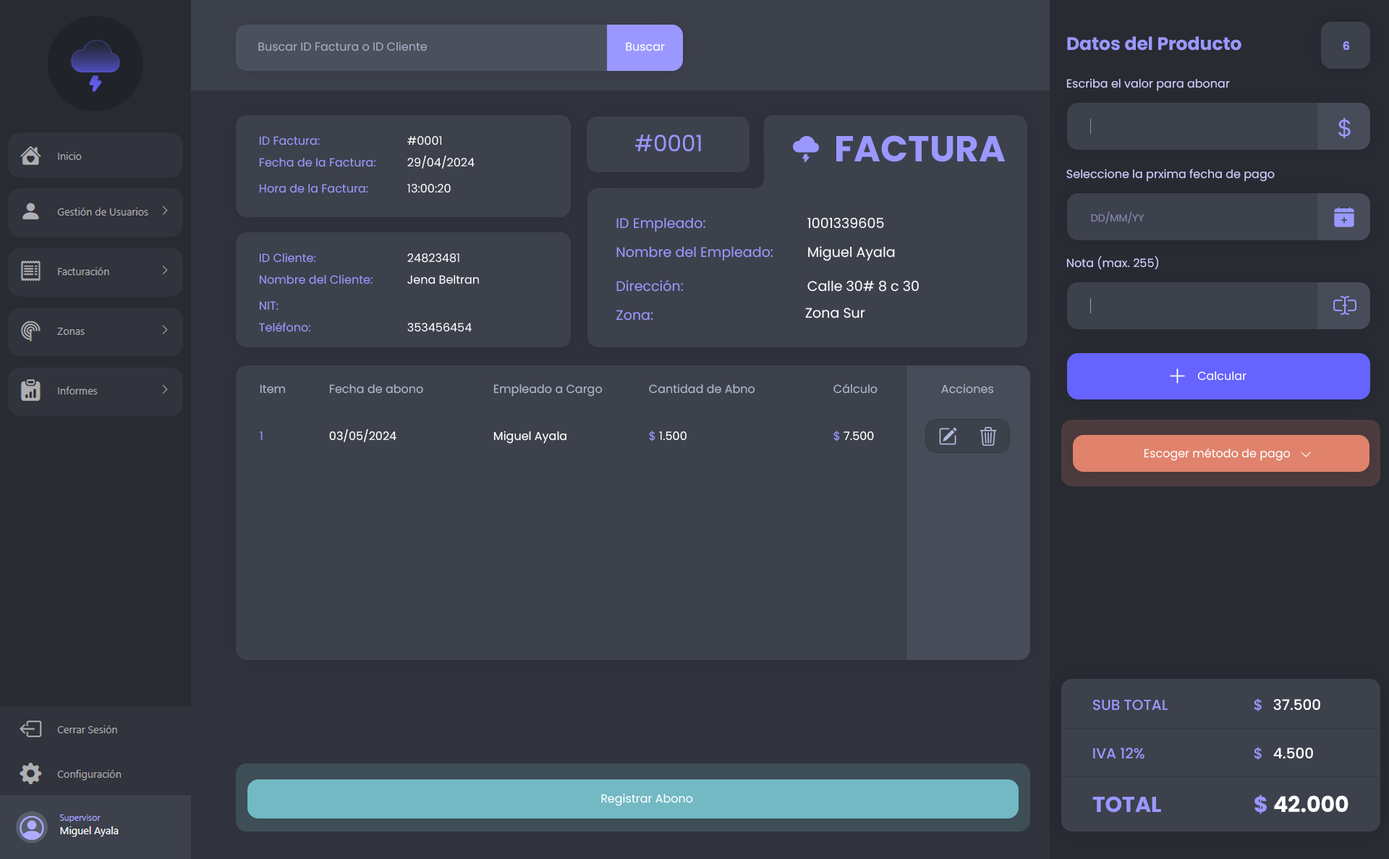
<style>
.page{position:relative;width:1389px;height:859px;background:#3d414c}
.page>*{position:absolute;margin:0}
.t1{font:11.6px "Poppins-Regular";color:#a2aac0}
.t2{font:11.6px "Poppins-Regular";color:#ffffff}
.t3{font:18.1px "Poppins-Bold";color:#9a98ff}
.t4{font:11.6px "Poppins-Bold";color:#9a98ff}
.t5{font:11.6px "Poppins-Regular";color:#cfceff}
.t6{font:11.6px "Poppins-Regular";color:#9a98ff}
.t7{font:22.4px "Poppins-Regular";color:#9a98ff}
.t8{font:36.2px "Poppins-Bold";color:#9a98ff}
.t9{font:13.8px "Poppins-Regular";color:#9a98ff}
.t10{font:13.8px "Poppins-Regular";color:#ffffff}
.t11{font:10.1px "Poppins-Regular";color:#8484ac}
.t12{font:11.6px "Poppins-Regular";color:#aeb5c8}
.t13{font:14.5px "Poppins-Medium";color:#9a98ff}
.t14{font:14.5px "Poppins-Medium";color:#ffffff}
.t15{font:21.7px "Poppins-Bold";color:#9a98ff}
.t16{font:21.7px "Poppins-Bold";color:#ffffff}
</style>
<div class="page">
<p class="t1" style="left:258px;top:41px;width:169px;height:10px">Buscar ID Factura o ID Cliente</p>
<p class="t2" style="left:626px;top:42px;width:39px;height:9px">Buscar</p>
<p class="t3" style="left:1067px;top:36px;width:174px;height:15px">Datos del Producto</p>
<p class="t4" style="left:1343px;top:41px;width:6px;height:9px">6</p>
<p class="t5" style="left:1066px;top:78px;width:164px;height:13px">Escriba el valor para abonar</p>
<p class="t6" style="left:259px;top:136px;width:61px;height:9px">ID Factura:</p>
<p class="t2" style="left:407px;top:136px;width:35px;height:9px">#0001</p>
<p class="t7" style="left:635px;top:135px;width:66px;height:16px">#0001</p>
<p class="t8" style="left:836px;top:135px;width:169px;height:27px">FACTURA</p>
<p class="t6" style="left:259px;top:158px;width:116px;height:9px">Fecha de la Factura:</p>
<p class="t2" style="left:407px;top:156px;width:68px;height:13px">29/04/2024</p>
<p class="t5" style="left:1066px;top:169px;width:209px;height:13px">Seleccione la prxima fecha de pago</p>
<p class="t6" style="left:259px;top:184px;width:109px;height:9px">Hora de la Factura:</p>
<p class="t2" style="left:407px;top:184px;width:44px;height:9px">13:00:20</p>
<p class="t9" style="left:616px;top:217px;width:89px;height:15px">ID Empleado:</p>
<p class="t10" style="left:807px;top:217px;width:77px;height:12px">1001339605</p>
<p class="t11" style="left:1091px;top:211px;width:53px;height:13px">DD/MM/YY</p>
<p class="t9" style="left:616px;top:246px;width:157px;height:15px">Nombre del Empleado:</p>
<p class="t10" style="left:808px;top:246px;width:87px;height:15px">Miguel Ayala</p>
<p class="t6" style="left:259px;top:252px;width:57px;height:11px">ID Cliente:</p>
<p class="t2" style="left:407px;top:253px;width:52px;height:10px">24823481</p>
<p class="t5" style="left:1066px;top:255px;width:93px;height:15px">Nota (max. 255)</p>
<p class="t6" style="left:259px;top:274px;width:114px;height:10px">Nombre del Cliente:</p>
<p class="t2" style="left:407px;top:275px;width:72px;height:9px">Jena Beltran</p>
<p class="t9" style="left:616px;top:279px;width:67px;height:13px">Dirección:</p>
<p class="t10" style="left:807px;top:280px;width:112px;height:12px">Calle 30# 8 c 30</p>
<p class="t6" style="left:259px;top:301px;width:19px;height:9px">NIT:</p>
<p class="t9" style="left:616px;top:310px;width:37px;height:10px">Zona:</p>
<p class="t10" style="left:805px;top:307px;width:60px;height:11px">Zona Sur</p>
<p class="t6" style="left:259px;top:322px;width:51px;height:10px">Teléfono:</p>
<p class="t2" style="left:407px;top:323px;width:65px;height:9px">353456454</p>
<p class="t2" style="left:1197px;top:371px;width:49px;height:9px">Calcular</p>
<p class="t12" style="left:260px;top:384px;width:25px;height:9px">Item</p>
<p class="t12" style="left:329px;top:384px;width:94px;height:9px">Fecha de abono</p>
<p class="t12" style="left:493px;top:384px;width:110px;height:12px">Empleado a Cargo</p>
<p class="t12" style="left:649px;top:383px;width:106px;height:10px">Cantidad de Abno</p>
<p class="t12" style="left:833px;top:383px;width:44px;height:10px">Cálculo</p>
<p class="t12" style="left:941px;top:383px;width:53px;height:10px">Acciones</p>
<p class="t6" style="left:260px;top:431px;width:3px;height:10px">1</p>
<p class="t2" style="left:329px;top:429px;width:67px;height:13px">03/05/2024</p>
<p class="t2" style="left:493px;top:430px;width:73px;height:13px">Miguel Ayala</p>
<p class="t2" style="left:649px;top:430px;width:37px;height:11px"><span class="t6">$</span> 1.500</p>
<p class="t2" style="left:833px;top:430px;width:41px;height:11px"><span class="t6">$</span> 7.500</p>
<p class="t2" style="left:1144px;top:448px;width:146px;height:13px">Escoger método de pago</p>
<p class="t13" style="left:1093px;top:699px;width:75px;height:11px">SUB TOTAL</p>
<p class="t13" style="left:1254px;top:698px;width:8px;height:13px">$</p>
<p class="t14" style="left:1273px;top:699px;width:47px;height:11px">37.500</p>
<p class="t13" style="left:1093px;top:747px;width:51px;height:12px">IVA 12%</p>
<p class="t13" style="left:1254px;top:746px;width:8px;height:14px">$</p>
<p class="t14" style="left:1273px;top:747px;width:40px;height:12px">4.500</p>
<p class="t2" style="left:601px;top:793px;width:92px;height:13px">Registrar Abono</p>
<p class="t15" style="left:1092px;top:796px;width:69px;height:16px">TOTAL</p>
<p class="t15" style="left:1254px;top:794px;width:13px;height:20px">$</p>
<p class="t16" style="left:1274px;top:795px;width:74px;height:17px">42.000</p>
</div>
